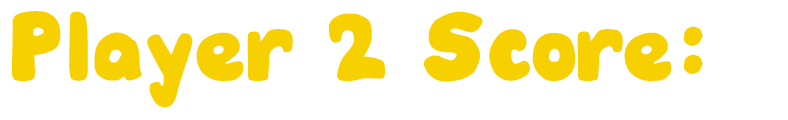
<style>
.page{position:relative;width:788px;height:120px;background:#ffffff}
.page>*{position:absolute;margin:0}
.t1{font:72px "DJBHUNKYCHUNK-Bold";color:#f6d000}
</style>
<div class="page">
<p class="t1" style="left:12px;top:11px;width:691px;height:97px">Player 2 Score:</p>
</div>
